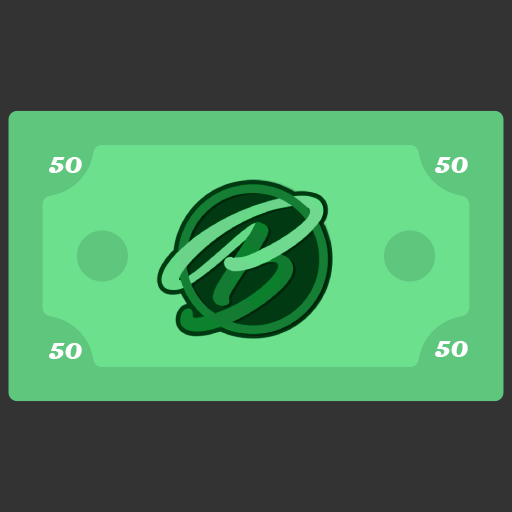
<style>
.page{position:relative;width:512px;height:512px;background:#333333}
.page>*{position:absolute;margin:0}
.t1{font:24px "Magneto-Bold";color:#ffffff}
</style>
<div class="page">
<p class="t1" style="left:49px;top:157px;width:33px;height:16px">50</p>
<p class="t1" style="left:435px;top:157px;width:33px;height:16px">50</p>
<p class="t1" style="left:435px;top:341px;width:33px;height:16px">50</p>
<p class="t1" style="left:49px;top:343px;width:33px;height:16px">50</p>
</div>
